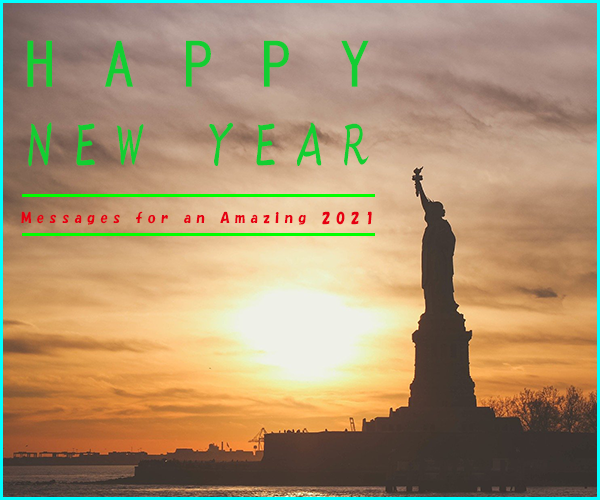
<style>
.page{position:relative;width:600px;height:500px}
.page>*{position:absolute;margin:0}
.t1{font:60px/80px "HGGyoshotai";color:#13ce32}
.t2{font:60px/80px "MS-Gothic";color:#13ce32}
.t3{font:14px "HGSSoeiKakupoptai";color:#e60012}
</style>
<div class="page">
<p class="t1" style="left:27px;top:40px;width:342px;height:127px;text-align:justify"><span class="t2">HAPPY<br></span>NEW YEAR</p>
<p class="t3" style="left:21px;top:211px;width:351px;height:14px">Messages for an Amazing 2021</p>
</div>
